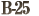
<style>
.page{position:relative;width:39px;height:16px;background:#ffffff}
.page>*{position:absolute;margin:0}
.t1{font:17px "RyuminPro-ExBold";letter-spacing:-0.08em;color:#4a3f32;font-weight:bold;scale:0.9 1}
</style>
<div class="page">
<p class="t1" style="left:1px;top:1px;width:29px;height:14px">B-25</p>
</div>
